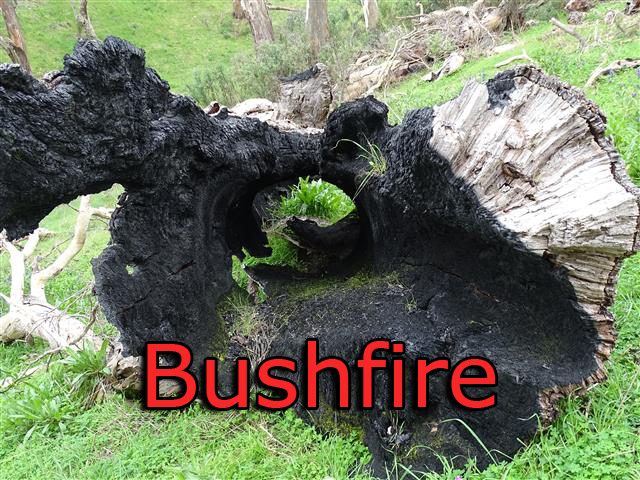
<style>
.page{position:relative;width:640px;height:480px}
.page>*{position:absolute;margin:0}
.t1{font:87.4px "Verdana";color:#f72727}
</style>
<div class="page">
<p class="t1" style="left:147px;top:341px;width:349px;height:67px">Bushfire</p>
</div>
